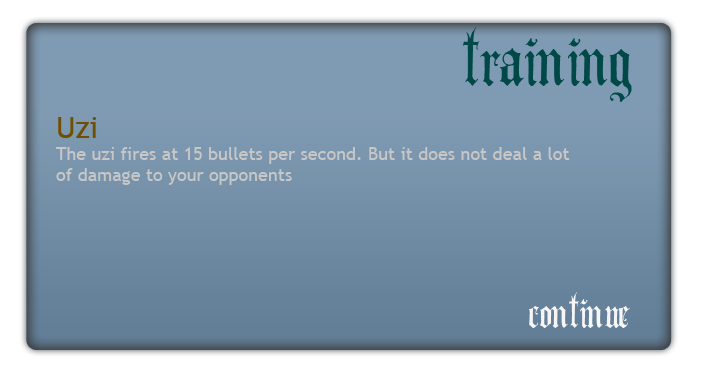
<style>
.page{position:relative;width:707px;height:377px}
.page>*{position:absolute;margin:0}
.t1{font:100px "AngloText";color:#004948}
.t2{font:18px "TrebuchetMS";color:#c7c7c7}
.t3{font:30px "TrebuchetMS";color:#6f4f01}
.t4{font:60px "AngloText";color:#f6f6f6}
</style>
<div class="page">
<p class="t1" style="left:463px;top:27px;width:169px;height:75px">training</p>
<p class="t2" style="left:56px;top:117px;width:514px;height:68px"><span class="t3">Uzi<br></span>The uzi fires at 15 bullets per second. But it does not deal a lot<br>of damage to your opponents</p>
<p class="t4" style="left:529px;top:292px;width:101px;height:36px">continue</p>
</div>
